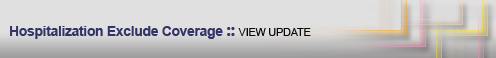
<style>
.page{position:relative;width:496px;height:58px;background:#e1e0e0}
.page>*{position:absolute;margin:0}
.t1{font:14px "Arial-BoldMT";letter-spacing:-0.025em;color:#333366}
.t2{font:18px "SegoeUI-Bold";letter-spacing:-0.025em;color:#333366}
.t3{font:11px "ArialMT";letter-spacing:-0.025em;color:#070707}
</style>
<div class="page">
<p class="t1" style="left:10px;top:26px;width:301px;height:13px">Hospitalization Exclude Coverage <span class="t2">:: </span><span class="t3">VIEW UPDATE</span></p>
</div>
